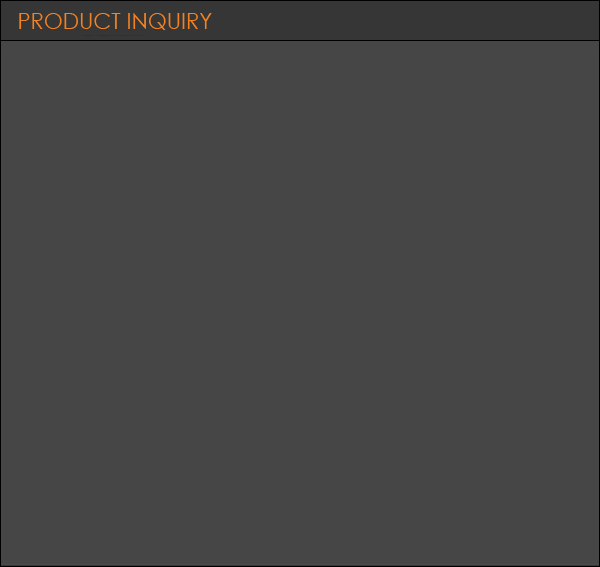
<style>
.page{position:relative;width:600px;height:567px;background:#464646}
.page>*{position:absolute;margin:0}
.t1{font:21.9px "CenturyGothic";color:#f48221}
</style>
<div class="page">
<p class="t1" style="left:19px;top:13px;width:193px;height:17px">PRODUCT INQUIRY</p>
</div>
